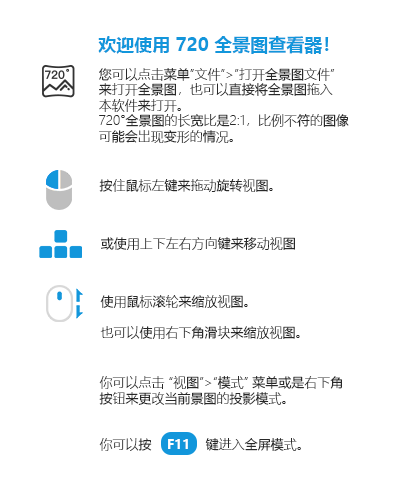
<style>
.page{position:relative;width:400px;height:500px;background:#ffffff}
.page>*{position:absolute;margin:0}
.t1{font:18px "MicrosoftYaHei-Bold";color:#1296db}
.t2{font:13px "MicrosoftYaHeiLight";color:#282828}
.t3{font:13px "MicrosoftYaHei-Bold";color:#ffffff}
</style>
<div class="page">
<p class="t1" style="left:98px;top:36px;width:231px;height:18px">欢迎使用 720 全景图查看器！</p>
<p class="t2" style="left:99px;top:68px;width:250px;height:75px">您可以点击菜单”文件”&gt;”打开全景图文件”<br>来打开全景图，也可以直接将全景图拖入<br>本软件来打开。<br>720°全景图的长宽比是2:1，比例不符的图像<br>可能会出现变形的情况。</p>
<p class="t2" style="left:99px;top:179px;width:174px;height:13px">按住鼠标左键来拖动旋转视图。</p>
<p class="t2" style="left:101px;top:237px;width:194px;height:13px">或使用上下左右方向键来移动视图</p>
<p class="t2" style="left:100px;top:295px;width:200px;height:44px">使用鼠标滚轮来缩放视图。<br><br>也可以使用右下角滑块来缩放视图。</p>
<p class="t2" style="left:99px;top:376px;width:243px;height:75px">你可以点击 “视图”&gt;“模式” 菜单或是右下角<br>按钮来更改当前景图的投影模式。<br><br><br>你可以按    <span class="t3">F11</span>    键进入全屏模式。</p>
</div>
